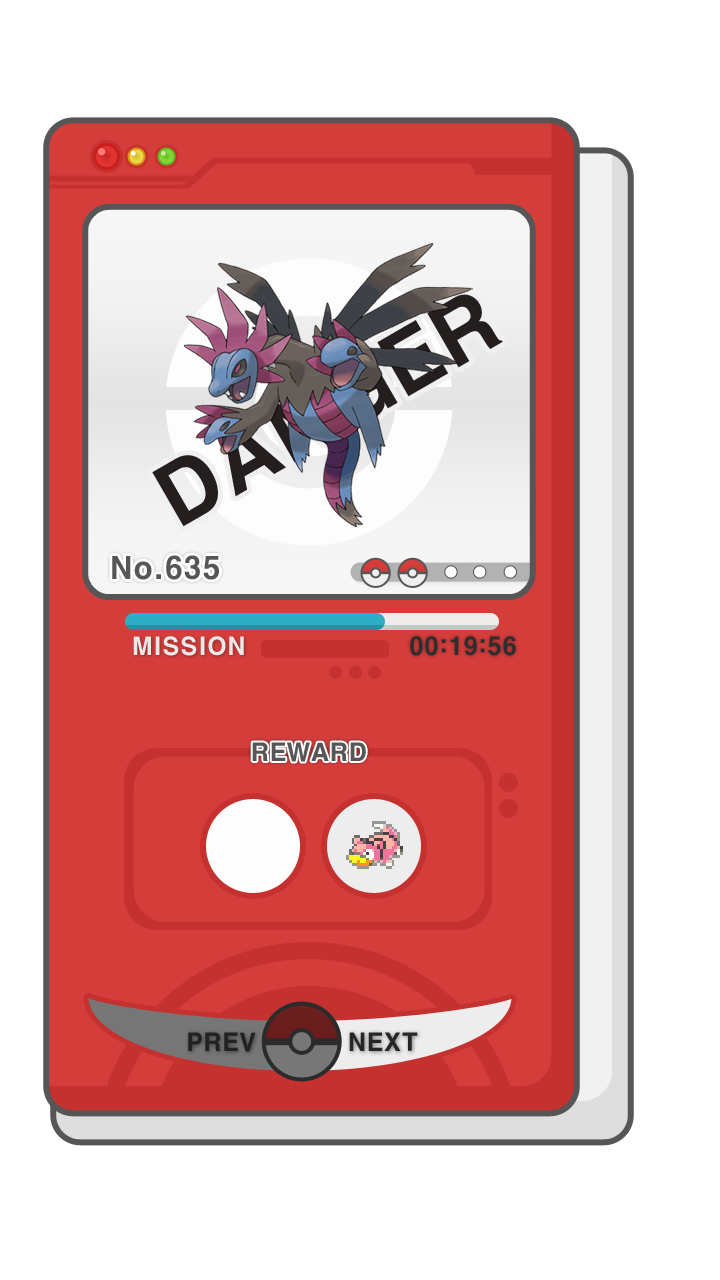
<style>
.page{position:relative;width:720px;height:1280px;background:#ffffff}
.page>*{position:absolute;margin:0}
.t1{font:81.2px "H2gtrE";color:#241e1e}
.t2{font:30px "H2gtrE";color:#565656}
.t3{font:24px "H2gtrE";color:#e9e9e9}
.t4{font:24px "H2gtrE";color:#2e2e2e}
.t5{font:24px "H2gtrE";color:#565656}
.t6{font:24px "H2gtrE";color:#222222}
.t7{font:24px "H2gtrE";color:#262626}
</style>
<div class="page">
<p class="t1" style="left:152px;top:294px;width:351px;height:233px;rotate:-30deg">DANGER</p>
<p class="t2" style="left:112px;top:555px;width:107px;height:25px">No.635</p>
<p class="t3" style="left:133px;top:636px;width:111px;height:20px">MISSION</p>
<p class="t4" style="left:410px;top:636px;width:106px;height:20px">00:19:56</p>
<p class="t5" style="left:252px;top:742px;width:114px;height:20px">REWARD</p>
<p class="t6" style="left:188px;top:1032px;width:68px;height:20px">PREV</p>
<p class="t7" style="left:349px;top:1032px;width:69px;height:19px">NEXT</p>
</div>
